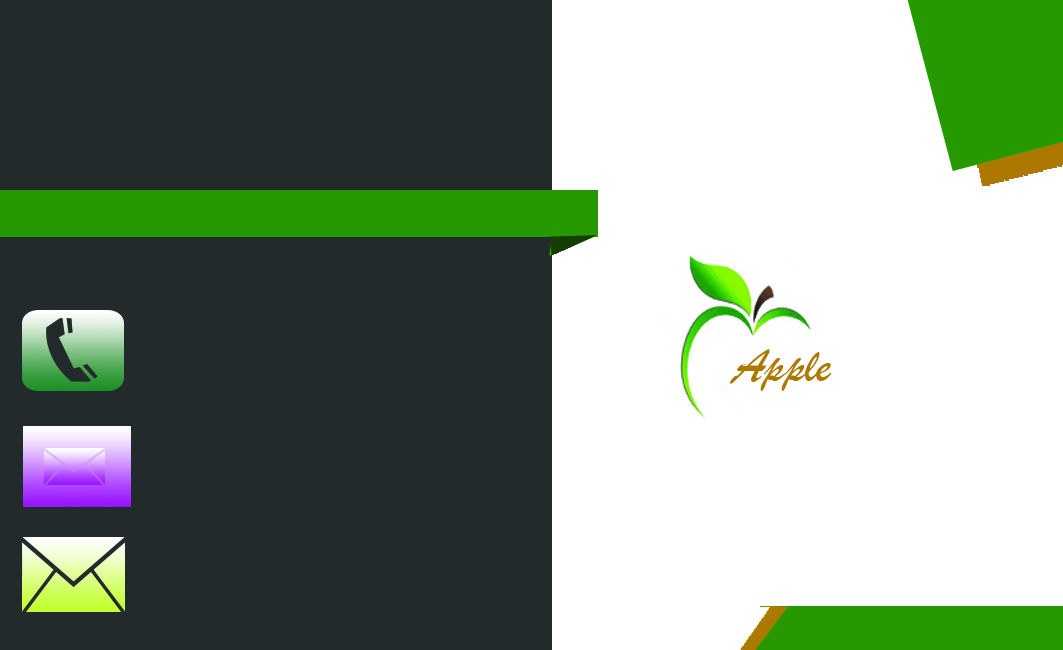
<style>
.page{position:relative;width:1063px;height:650px;background:#232a2b}
.page>*{position:absolute;margin:0}
.t1{font:50px "BrushScriptMT";color:#ad7900}
</style>
<div class="page">
<p class="t1" style="left:730px;top:349px;width:101px;height:42px">Apple</p>
</div>
